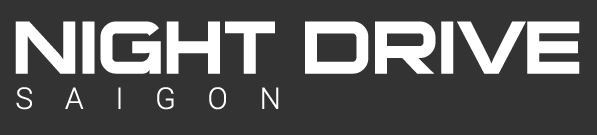
<style>
.page{position:relative;width:597px;height:135px;background:#333333}
.page>*{position:absolute;margin:0}
.t1{font:72px "SuiGeneris";color:#ffffff;text-transform:uppercase}
.t2{font:30px "Roboto-Light";letter-spacing:1.06em;color:#ffffff;text-transform:uppercase}
</style>
<div class="page">
<p class="t1" style="left:15px;top:21px;width:565px;height:53px">Night DRIVE</p>
<p class="t2" style="left:16px;top:87px;width:263px;height:23px">SAIGON</p>
</div>
